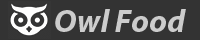
<style>
.page{position:relative;width:200px;height:40px;background:#333333}
.page>*{position:absolute;margin:0}
.t1{font:32px "MyriadPro-BoldIt";color:#cccccc}
</style>
<div class="page">
<p class="t1" style="left:55px;top:9px;width:131px;height:23px">Owl Food</p>
</div>
